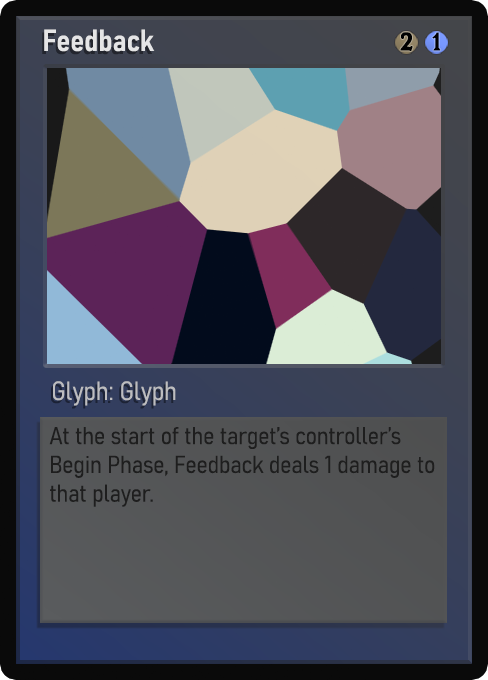
<style>
.page{position:relative;width:488px;height:680px}
.page>*{position:absolute;margin:0}
.t1{font:30px "Bahnschrift-SemiBoldSemiCondensed";color:#f2f2f2;font-weight:bold}
.t2{font:25px "WTRRoycroft";color:#000000;font-weight:bold;scale:1.09 1}
.t3{font:26px "Bahnschrift-LightSemiCondensed";color:#c8c8c8;font-weight:bold}
.t4{font:24px "Bahnschrift-LightSemiCondensed";color:#1e1e1e;font-weight:bold}
</style>
<div class="page">
<p class="t1" style="left:44px;top:29px;width:111px;height:23px;opacity:0.9">Feedback</p>
<p class="t2" style="left:400px;top:32px;width:13px;height:19px">2</p>
<p class="t2" style="left:432px;top:32px;width:9px;height:19px">1</p>
<p class="t3" style="left:53px;top:381px;width:123px;height:25px;opacity:0.9">Glyph: Glyph</p>
<p class="t4" style="left:49px;top:427px;width:386px;height:80px">At the start of the target’s controller’s Begin Phase, Feedback deals 1 damage to that player.</p>
</div>
